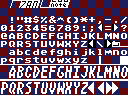
<style>
.page{position:relative;width:128px;height:96px;background:#1d1f5d}
.page>*{position:absolute;margin:0}
.t1{font:8px "AtariClassicChunky";color:#ffffff}
.t2{font:8px/8px "AtariClassicChunky";color:#ffffff}
</style>
<div class="page">
<p class="t1" style="left:11px;top:16px;width:116px;height:8px">! #$%&amp;^()*+,-./</p>
<p class="t1" style="left:1px;top:24px;width:126px;height:8px">0123456789:;&lt;=&gt;?</p>
<p class="t1" style="left:1px;top:41px;width:127px;height:6px">PQRSTUVWXYZ[\]^_</p>
<p class="t1" style="left:1px;top:33px;width:126px;height:6px">@ABCDEFGHIJKLMNO</p>
<p class="t2" style="left:1px;top:49px;width:126px;height:15px">abcdefghijklmno<br>pqrstuvwxyz |</p>
</div>
